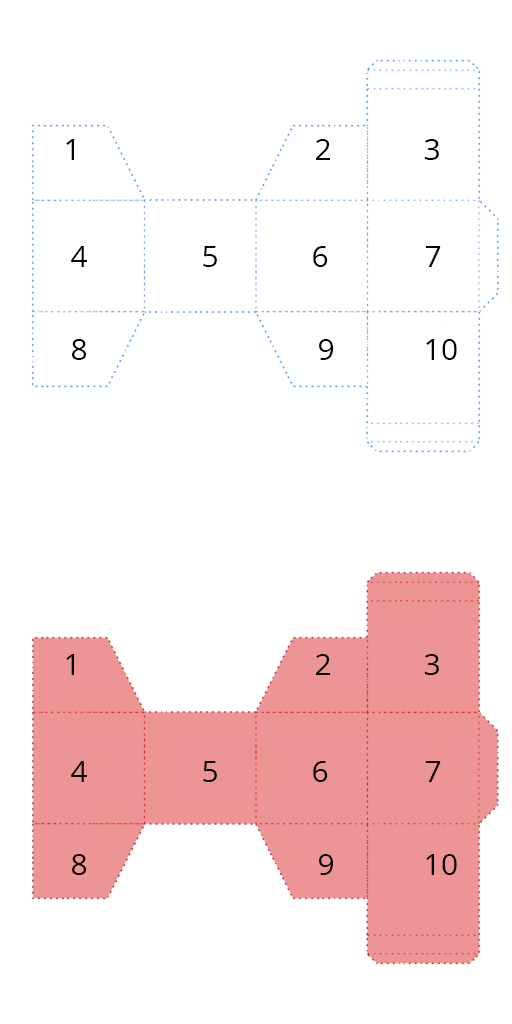
<style>
.page{position:relative;width:512px;height:1024px;background:#ffffff}
.page>*{position:absolute;margin:0}
.t1{font:30px "OpenSans-Regular";color:#000000}
</style>
<div class="page">
<p class="t1" style="left:66px;top:139px;width:8px;height:21px">1</p>
<p class="t1" style="left:316px;top:139px;width:14px;height:21px">2</p>
<p class="t1" style="left:424px;top:139px;width:15px;height:21px">3</p>
<p class="t1" style="left:71px;top:246px;width:16px;height:21px">4</p>
<p class="t1" style="left:203px;top:246px;width:14px;height:21px">5</p>
<p class="t1" style="left:313px;top:246px;width:15px;height:21px">6</p>
<p class="t1" style="left:425px;top:246px;width:16px;height:21px">7</p>
<p class="t1" style="left:72px;top:339px;width:15px;height:21px">8</p>
<p class="t1" style="left:319px;top:339px;width:14px;height:21px">9</p>
<p class="t1" style="left:426px;top:339px;width:31px;height:21px">10</p>
<p class="t1" style="left:66px;top:654px;width:8px;height:21px">1</p>
<p class="t1" style="left:316px;top:654px;width:14px;height:21px">2</p>
<p class="t1" style="left:424px;top:654px;width:15px;height:21px">3</p>
<p class="t1" style="left:71px;top:761px;width:16px;height:21px">4</p>
<p class="t1" style="left:203px;top:761px;width:14px;height:21px">5</p>
<p class="t1" style="left:313px;top:761px;width:15px;height:21px">6</p>
<p class="t1" style="left:425px;top:761px;width:16px;height:21px">7</p>
<p class="t1" style="left:72px;top:854px;width:15px;height:21px">8</p>
<p class="t1" style="left:319px;top:854px;width:14px;height:21px">9</p>
<p class="t1" style="left:426px;top:854px;width:31px;height:21px">10</p>
</div>
